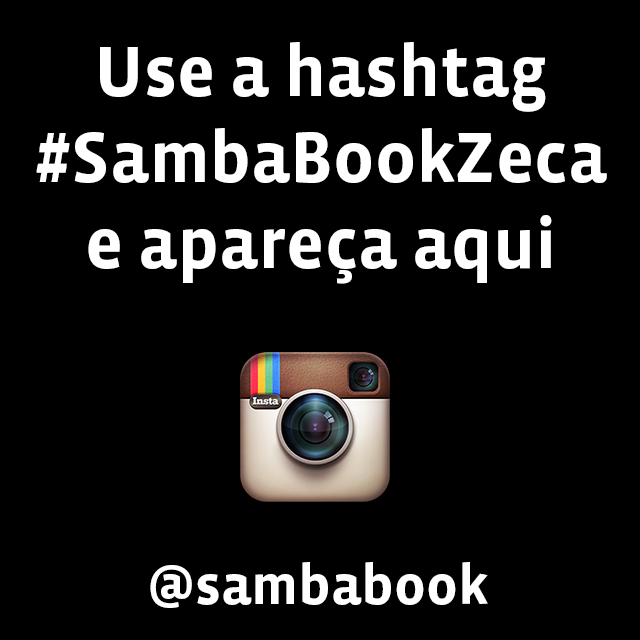
<style>
.page{position:relative;width:640px;height:640px;background:#000000}
.page>*{position:absolute;margin:0}
.t1{font:72px "VistaSansOT-Bold";color:#ffffff}
.t2{font:56px "VistaSansOT-Bold";color:#ffffff}
</style>
<div class="page">
<p class="t1" style="left:36px;top:42px;width:571px;height:242px;text-align:center">Use a hashtag<br>#SambaBookZeca<br>e apareça aqui</p>
<p class="t2" style="left:150px;top:562px;width:338px;height:46px">@sambabook</p>
</div>
